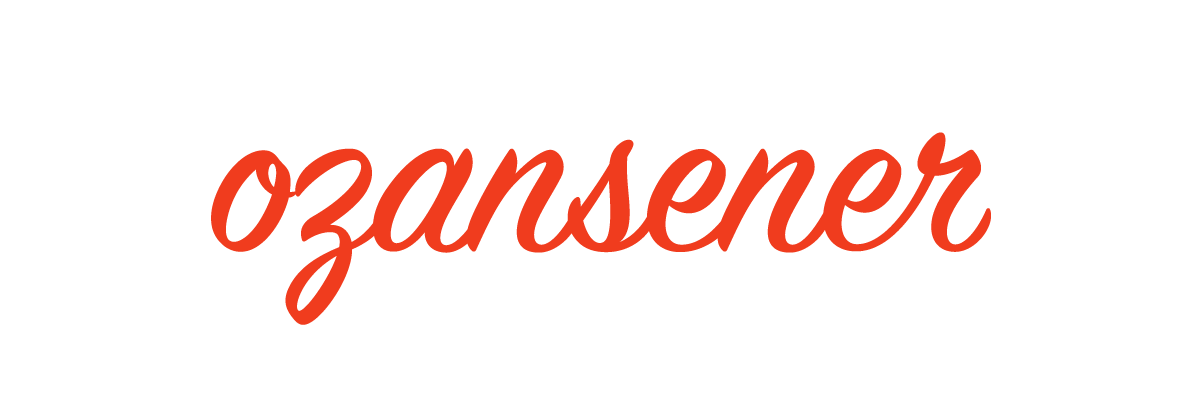
<style>
.page{position:relative;width:1200px;height:400px;background:#ffffff}
.page>*{position:absolute;margin:0}
.t1{font:250px "SignPainter-HouseScript";color:#f03c1e}
.t2{font:250px "SignPainter-HouseScript";letter-spacing:-0.015em;color:#f03c1e}
</style>
<div class="page">
<p class="t1" style="left:211px;top:132px;width:780px;height:193px"><span class="t2">oz</span>ansener</p>
</div>
